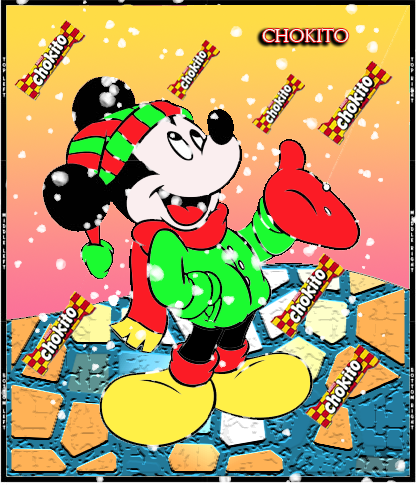
<style>
.page{position:relative;width:419px;height:485px}
.page>*{position:absolute;margin:0}
.t1{font:18px "PerpetuaTitlingMT-Light";color:#f3f7f9}
</style>
<div class="page">
<p class="t1" style="left:262px;top:28px;width:87px;height:14px">chokito</p>
</div>
